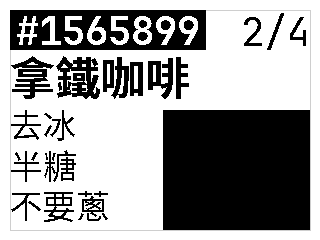
<style>
.page{position:relative;width:320px;height:240px;background:#ffffff}
.page>*{position:absolute;margin:0}
.t1{font:39.5px "JetBrainsMono-Bold";color:#ffffff}
.t2{font:39.5px "JetBrainsMono-Regular";color:#000000}
.t3{font:45.1px "NotoSansTC-Bold";color:#000000}
.t4{font:33.8px "NotoSansTC-Regular";color:#000000}
</style>
<div class="page">
<p class="t1" style="left:17px;top:16px;width:181px;height:29px">#1565899</p>
<p class="t2" style="left:244px;top:13px;width:62px;height:37px">2/4</p>
<p class="t3" style="left:11px;top:56px;width:178px;height:43px">拿鐵咖啡</p>
<p class="t4" style="left:11px;top:110px;width:97px;height:112px">去冰<br>半糖<br>不要蔥</p>
</div>
